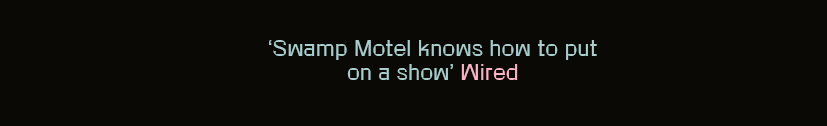
<style>
.page{position:relative;width:827px;height:126px;background:#0a0905}
.page>*{position:absolute;margin:0}
.t1{font:20.1px "RotontoTrial-Regular";letter-spacing:0.05em;color:#a8cdcd}
.t2{font:20.1px "RotontoTrial-Regular";letter-spacing:0.05em;color:#f8b4c5}
</style>
<div class="page">
<p class="t1" style="left:269px;top:40px;width:328px;height:40px;text-align:center">‘Swamp Motel knows how to put on a show’ <span class="t2">Wired</span></p>
</div>
